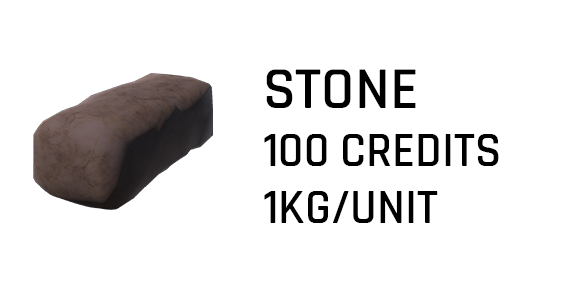
<style>
.page{position:relative;width:568px;height:283px;background:#ffffff}
.page>*{position:absolute;margin:0}
.t1{font:48px "Rajdhani-SemiBold";color:#000000}
.t2{font:60px "Rajdhani-SemiBold";color:#000000}
</style>
<div class="page">
<p class="t1" style="left:264px;top:69px;width:235px;height:154px"><span class="t2">STONE<br></span>100 CREDITS<br>1KG/UNIT</p>
</div>
